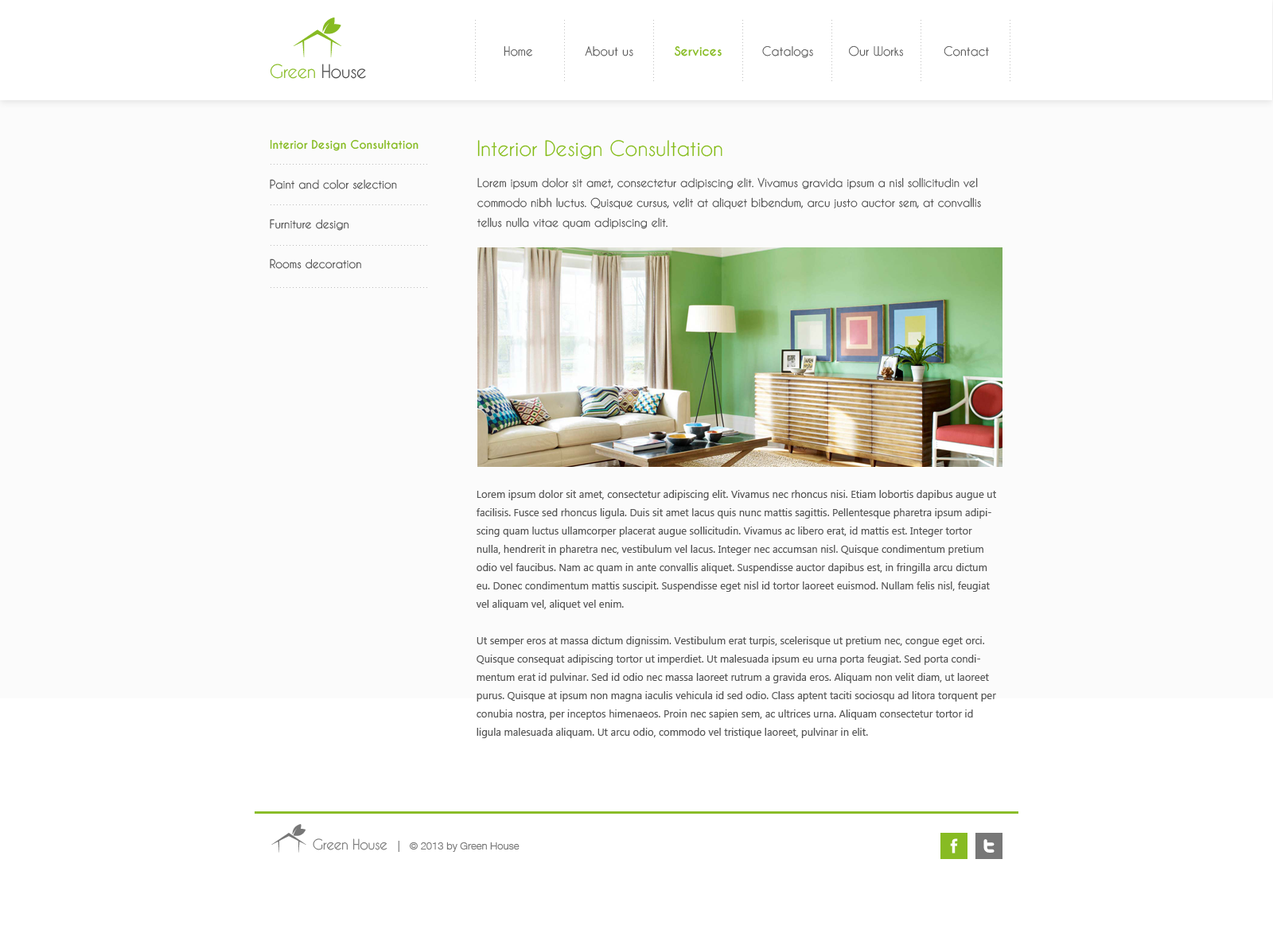
<style>
.page{position:relative;width:1273px;height:937px;background:#fbfbfb}
.page>*{position:absolute;margin:0}
.t1{font:11.9px "CaviarDreams";color:#555555}
.t2{font:11.9px "CaviarDreams-Bold";color:#87bb23}
.t3{font:17.5px "CaviarDreams";letter-spacing:-0.025em;color:#87bb23}
.t4{font:17.5px "CaviarDreams";letter-spacing:-0.025em;color:#444444}
.t5{font:11.1px/39.8px "CaviarDreams";color:#555555}
.t6{font:11.1px/39.8px "CaviarDreams-Bold";color:#87bb23}
.t7{font:19.9px "CaviarDreams";color:#83bb15}
.t8{font:11.1px/19.9px "CaviarDreams";color:#555555}
.t9{font:10.3px/18.3px "SegoeUI";color:#555555}
.t10{font:13.5px "CaviarDreams";letter-spacing:-0.025em;color:#777777}
.t11{font:10.3px "HelveticaNeueW02-45Light";color:#777777}
.t12{font:11.1px "HelveticaNeueW02-45Light";color:#777777}
</style>
<div class="page">
<p class="t1" style="left:503px;top:45px;width:486px;height:13px">Home         About us           <span class="t2">Services       </span>Catalogs   Our Works          Contact</p>
<p class="t3" style="left:270px;top:64px;width:96px;height:15px">Green <span class="t4">House</span></p>
<p class="t5" style="left:270px;top:139px;width:148px;height:130px"><span class="t6">Interior Design Consultation<br></span>Paint and color selection<br>Furniture design<br>Rooms decoration</p>
<p class="t7" style="left:477px;top:140px;width:245px;height:20px">Interior Design Consultation</p>
<p class="t8" style="left:477px;top:177px;width:504px;height:52px">Lorem ipsum dolor sit amet, consectetur adipiscing elit. Vivamus gravida ipsum a nisl sollicitudin vel commodo nibh luctus. Quisque cursus, velit at aliquet bibendum, arcu justo auctor sem, at convallis tellus nulla vitae quam adipiscing elit.</p>
<p class="t9" style="left:476px;top:490px;width:520px;height:248px">Lorem ipsum dolor sit amet, consectetur adipiscing elit. Vivamus nec rhoncus nisi. Etiam lobortis dapibus augue ut facilisis. Fusce sed rhoncus ligula. Duis sit amet lacus quis nunc mattis sagittis. Pellentesque pharetra ipsum adipiscing quam luctus ullamcorper placerat augue sollicitudin. Vivamus ac libero erat, id mattis est. Integer tortor nulla, hendrerit in pharetra nec, vestibulum vel lacus. Integer nec accumsan nisl. Quisque condimentum pretium odio vel faucibus. Nam ac quam in ante convallis aliquet. Suspendisse auctor dapibus est, in fringilla arcu dictum eu. Donec condimentum mattis suscipit. Suspendisse eget nisl id tortor laoreet euismod. Nullam felis nisl, feugiat vel aliquam vel, aliquet vel enim.<br><br>Ut semper eros at massa dictum dignissim. Vestibulum erat turpis, scelerisque ut pretium nec, congue eget orci. Quisque consequat adipiscing tortor ut imperdiet. Ut malesuada ipsum eu urna porta feugiat. Sed porta condimentum erat id pulvinar. Sed id odio nec massa laoreet rutrum a gravida eros. Aliquam non velit diam, ut laoreet purus. Quisque at ipsum non magna iaculis vehicula id sed odio. Class aptent taciti sociosqu ad litora torquent per conubia nostra, per inceptos himenaeos. Proin nec sapien sem, ac ultrices urna. Aliquam consectetur tortor id ligula malesuada aliquam. Ut arcu odio, commodo vel tristique laoreet, pulvinar in elit.</p>
<p class="t10" style="left:313px;top:838px;width:74px;height:12px">Green House</p>
<p class="t11" style="left:398px;top:841px;width:121px;height:11px"><span class="t12">|   </span>© 2013 by Green House</p>
</div>
